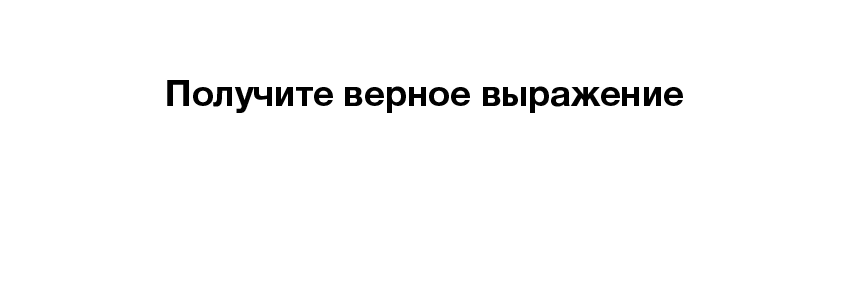
<style>
.page{position:relative;width:850px;height:283px;background:#ffffff}
.page>*{position:absolute;margin:0}
.t1{font:36px "HelveticaNeueCyr-Bold";color:#000000}
</style>
<div class="page">
<p class="t1" style="left:167px;top:80px;width:516px;height:33px">Получите верное выражение</p>
</div>
